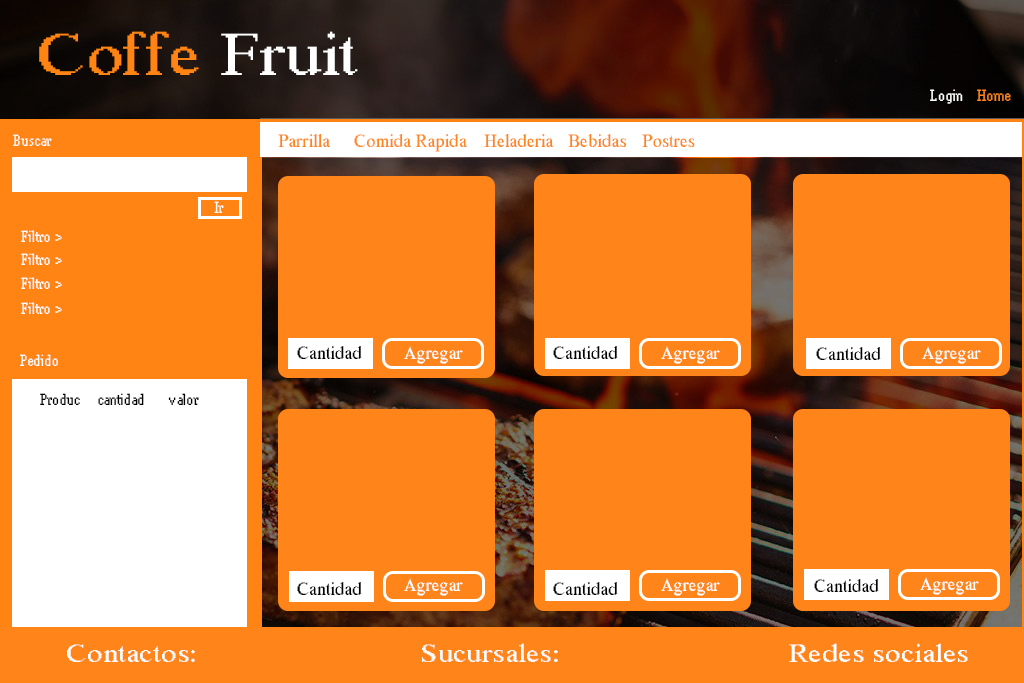
<style>
.page{position:relative;width:1024px;height:683px;background:#ff851b}
.page>*{position:absolute;margin:0}
.t1{font:60px "MS Serif";color:#ff851b;scale:1.21 1}
.t2{font:60px "MS Serif";color:#ffffff;scale:1.21 1}
.t3{font:14px "MS Serif";color:#ffffff}
.t4{font:14px "MS Serif";color:#ff851b}
.t5{font:14px "MS Serif";color:#fbfbfb}
.t6{font:18px "MS Serif";color:#ff851b}
.t7{font:18px "MS Serif";color:#000000}
.t8{font:18px "MS Serif";color:#ffffff}
.t9{font:14px "MS Serif";color:#000000}
.t10{font:25.4px "MS Serif";color:#fbfbfb;scale:1.21 1}
.t11{font:25.4px "MS Serif";color:#ffffff;scale:1.21 1}
.t12{font:25.4px "MS Serif";color:#ff851b;scale:1.21 1}
</style>
<div class="page">
<p class="t1" style="left:39px;top:31px;width:319px;height:44px">Coffe <span class="t2">Fruit</span></p>
<p class="t3" style="left:930px;top:89px;width:33px;height:15px">Login</p>
<p class="t4" style="left:977px;top:89px;width:34px;height:12px">Home</p>
<p class="t5" style="left:13px;top:134px;width:39px;height:12px">Buscar</p>
<p class="t6" style="left:278px;top:134px;width:52px;height:13px">Parrilla</p>
<p class="t6" style="left:354px;top:134px;width:113px;height:18px">Comida Rapida</p>
<p class="t6" style="left:484px;top:134px;width:70px;height:13px">Heladeria</p>
<p class="t6" style="left:568px;top:134px;width:59px;height:13px">Bebidas</p>
<p class="t6" style="left:642px;top:134px;width:53px;height:13px">Postres</p>
<p class="t5" style="left:214px;top:201px;width:10px;height:12px">Ir</p>
<p class="t5" style="left:21px;top:230px;width:41px;height:12px">Filtro &gt;</p>
<p class="t5" style="left:21px;top:253px;width:41px;height:12px">Filtro &gt;</p>
<p class="t5" style="left:21px;top:277px;width:41px;height:12px">Filtro &gt;</p>
<p class="t5" style="left:21px;top:302px;width:41px;height:12px">Filtro &gt;</p>
<p class="t7" style="left:297px;top:346px;width:65px;height:13px">Cantidad</p>
<p class="t8" style="left:404px;top:346px;width:59px;height:18px">Agregar</p>
<p class="t7" style="left:553px;top:346px;width:65px;height:13px">Cantidad</p>
<p class="t8" style="left:661px;top:346px;width:59px;height:18px">Agregar</p>
<p class="t7" style="left:816px;top:347px;width:65px;height:13px">Cantidad</p>
<p class="t8" style="left:922px;top:346px;width:59px;height:18px">Agregar</p>
<p class="t5" style="left:20px;top:354px;width:38px;height:12px">Pedido</p>
<p class="t9" style="left:40px;top:393px;width:159px;height:12px">Produc     cantidad       valor</p>
<p class="t7" style="left:297px;top:582px;width:65px;height:13px">Cantidad</p>
<p class="t8" style="left:404px;top:578px;width:59px;height:18px">Agregar</p>
<p class="t7" style="left:553px;top:582px;width:65px;height:13px">Cantidad</p>
<p class="t8" style="left:661px;top:578px;width:59px;height:18px">Agregar</p>
<p class="t7" style="left:814px;top:579px;width:65px;height:13px">Cantidad</p>
<p class="t8" style="left:920px;top:577px;width:59px;height:18px">Agregar</p>
<p class="t10" style="left:67px;top:644px;width:128px;height:18px">Contactos:</p>
<p class="t10" style="left:422px;top:643px;width:136px;height:19px">Sucursales:</p>
<p class="t11" style="left:789px;top:643px;width:186px;height:19px">Redes sociales<span class="t12">:</span></p>
</div>
